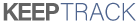
<style>
.page{position:relative;width:139px;height:23px;background:#ffffff}
.page>*{position:absolute;margin:0}
.t1{font:25px "AcuminPro-Bold";letter-spacing:-0.075em;color:#636363}
.t2{font:25px "AcuminPro-ExtraLight";letter-spacing:-0.025em;color:#4e648e}
</style>
<div class="page">
<p class="t1" style="left:3px;top:3px;width:56px;height:18px">KEEP</p>
<p class="t2" style="left:60px;top:2px;width:76px;height:19px">TRACK</p>
</div>
